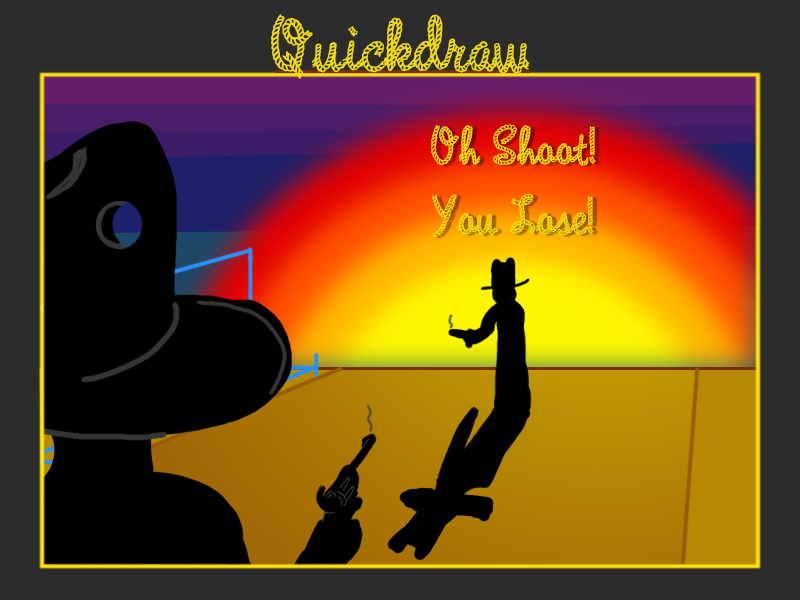
<style>
.page{position:relative;width:800px;height:600px;background:#2c2c2c}
.page>*{position:absolute;margin:0}
.t1{font:85px "RopeMF";color:#f0db10}
.t2{font:59px "RopeMF";color:#f0db10}
</style>
<div class="page">
<p class="t1" style="left:271px;top:14px;width:259px;height:65px">Quickdraw</p>
<p class="t2" style="left:430px;top:124px;width:166px;height:114px;text-align:center">Oh Shoot!<br>You Lose!</p>
</div>
